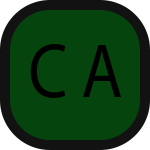
<style>
.page{position:relative;width:150px;height:150px;background:#05440d}
.page>*{position:absolute;margin:0}
.t1{font:77.1px "MyriadPro-Regular";letter-spacing:0.2em;color:#000000;scale:0.87 1}
</style>
<div class="page">
<p class="t1" style="left:30px;top:44px;width:91px;height:54px">CA</p>
</div>
